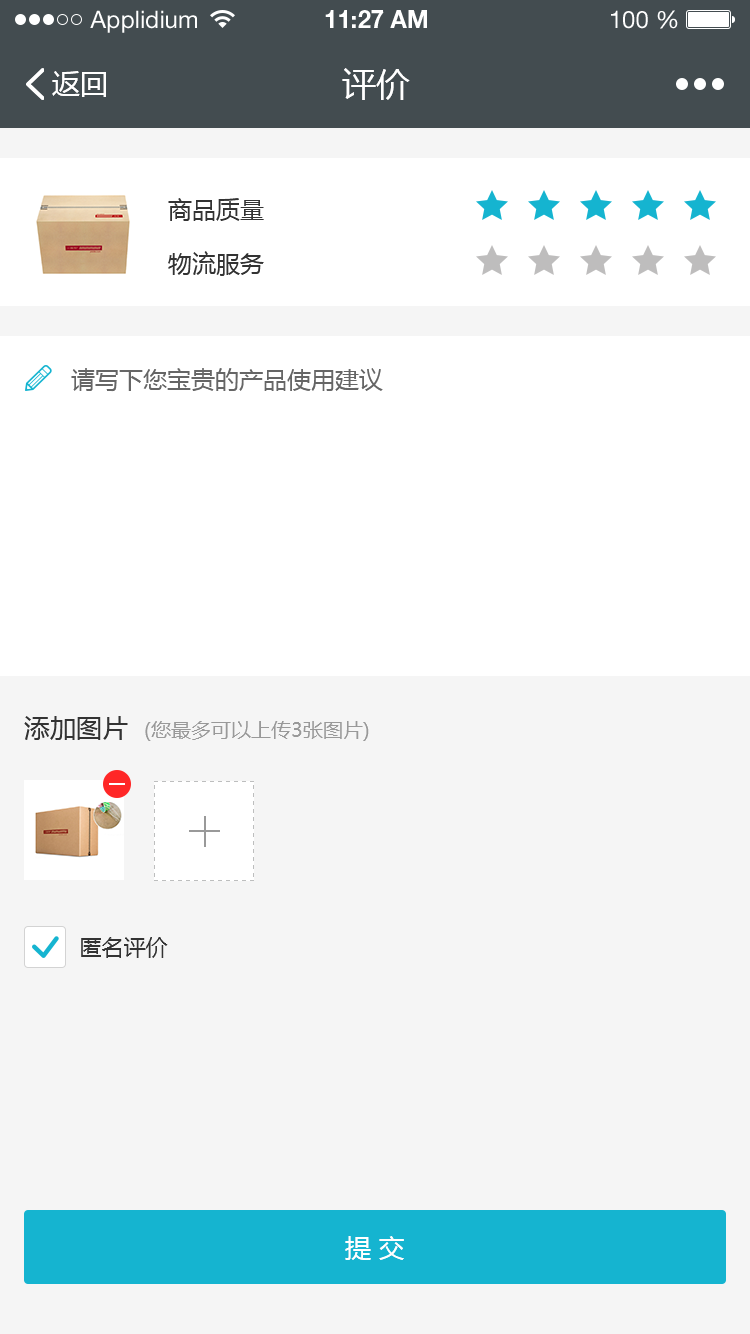
<style>
.page{position:relative;width:750px;height:1334px;background:#f5f5f5}
.page>*{position:absolute;margin:0}
.t1{font:24px "HelveticaNeueLTStd-Roman";color:#ffffff}
.t2{font:24px "HelveticaNeueLTStd-Bd";color:#ffffff}
.t3{font:28px "MicrosoftYaHei";color:#ffffff}
.t4{font:34px "MicrosoftYaHei";color:#ffffff}
.t5{font:24px "MicrosoftYaHei";color:#333333}
.t6{font:24px "MicrosoftYaHei";color:#666666}
.t7{font:20px "MicrosoftYaHei";color:#999999}
.t8{font:26px "MicrosoftYaHei";color:#333333}
.t9{font:22px "MicrosoftYaHei";color:#333333}
.t10{font:26px "MicrosoftYaHei";letter-spacing:0.3em;color:#ffffff}
</style>
<div class="page">
<p class="t1" style="left:90px;top:10px;width:107px;height:23px">Applidium</p>
<p class="t2" style="left:325px;top:10px;width:102px;height:18px">11:27 AM</p>
<p class="t1" style="left:611px;top:10px;width:67px;height:19px">100 %</p>
<p class="t3" style="left:52px;top:71px;width:54px;height:26px">返回</p>
<p class="t4" style="left:342px;top:68px;width:68px;height:32px">评价</p>
<p class="t5" style="left:168px;top:198px;width:96px;height:23px">商品质量</p>
<p class="t5" style="left:168px;top:251px;width:96px;height:25px">物流服务</p>
<p class="t6" style="left:71px;top:368px;width:312px;height:24px">请写下您宝贵的产品使用建议</p>
<p class="t7" style="left:24px;top:716px;width:345px;height:25px"><span class="t8">添加图片  </span>(您最多可以上传3张图片)</p>
<p class="t9" style="left:81px;top:937px;width:87px;height:21px">匿名评价</p>
<p class="t10" style="left:345px;top:1236px;width:59px;height:24px">提交</p>
</div>
